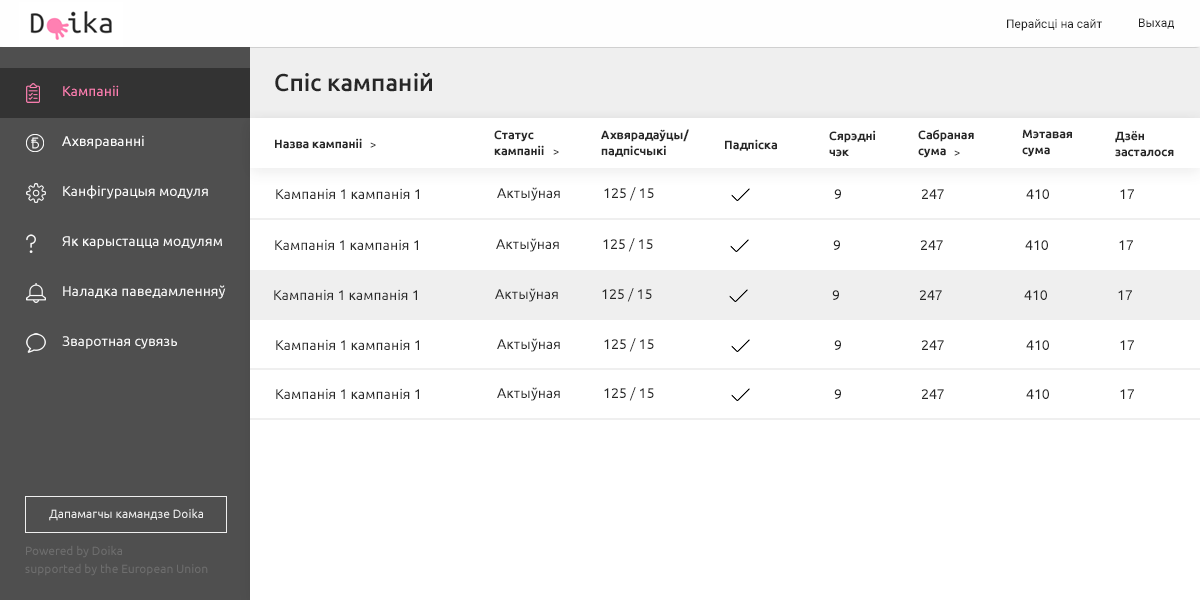
<style>
.page{position:relative;width:1200px;height:600px;background:#ffffff}
.page>*{position:absolute;margin:0}
.t1{font:12px "Roboto-Regular";color:#212121}
.t2{font:24px "Ubuntu-Medium";color:#272727}
.t3{font:14px/25px "Ubuntu-Regular";color:#fbfbfb}
.t4{font:14px/25px "Ubuntu-Regular";color:#ff80b2}
.t5{font:14px/25px "Ubuntu-Regular";color:#ffffff}
.t6{font:12px/16px "Ubuntu-Bold";color:#272727}
.t7{font:12px/16px "Roboto-Bold";color:#272727}
.t8{font:12px "Ubuntu-Bold";color:#272727}
.t9{font:12px "Roboto-Regular"}
.t10{font:14px "Ubuntu-Regular";color:#272727}
.t11{font:12px "Ubuntu-Regular";color:#f0f0f0}
.t12{font:12px/18px "Ubuntu-Regular";color:#6e6e6e}
</style>
<div class="page">
<p class="t1" style="left:1007px;top:19px;width:95px;height:12px">Перайсцi на сайт</p>
<p class="t1" style="left:1139px;top:18px;width:35px;height:11px">Выхад</p>
<p class="t2" style="left:275px;top:72px;width:157px;height:20px">Спiс кампанiй</p>
<p class="t3" style="left:62px;top:85px;width:164px;height:264px"><span class="t4">Кампанii             <br><br></span><span class="t5">Ахвяраваннi             <br></span><br>Канфiгурацыя модуля             <br><br>Як карыстацца модулям             <br><br>Наладка паведамленняў<br><br>Зваротная сувязь</p>
<p class="t6" style="left:494px;top:130px;width:50px;height:26px">Статус <br>кампанii</p>
<p class="t6" style="left:601px;top:129px;width:88px;height:28px">Ахвярадаўцы/<br><span class="t7"></span>падпісчыкi</p>
<p class="t6" style="left:829px;top:130px;width:47px;height:27px">Сярэднi <br>чэк</p>
<p class="t6" style="left:918px;top:129px;width:56px;height:29px">Сабраная <br>сума</p>
<p class="t6" style="left:1022px;top:129px;width:50px;height:28px">Мэтавая<br>сума</p>
<p class="t6" style="left:1115px;top:131px;width:59px;height:26px">Дзён<br>засталося</p>
<p class="t8" style="left:275px;top:138px;width:87px;height:11px">Назва кампанii</p>
<p class="t9" style="left:370px;top:142px;width:6px;height:6px">&gt;</p>
<p class="t9" style="left:553px;top:149px;width:6px;height:6px">&gt;</p>
<p class="t8" style="left:725px;top:139px;width:52px;height:12px">Падпiска</p>
<p class="t9" style="left:954px;top:150px;width:6px;height:6px">&gt;</p>
<p class="t10" style="left:276px;top:188px;width:143px;height:11px">Кампанiя 1 кампанiя 1</p>
<p class="t10" style="left:497px;top:187px;width:63px;height:14px">Актыўная</p>
<p class="t10" style="left:604px;top:187px;width:50px;height:14px">125 / 15</p>
<p class="t10" style="left:834px;top:189px;width:7px;height:10px">9</p>
<p class="t10" style="left:921px;top:189px;width:23px;height:10px">247</p>
<p class="t10" style="left:1026px;top:189px;width:23px;height:10px">410</p>
<p class="t10" style="left:1120px;top:189px;width:14px;height:10px">17</p>
<p class="t10" style="left:275px;top:239px;width:143px;height:11px">Кампанiя 1 кампанiя 1</p>
<p class="t10" style="left:496px;top:238px;width:63px;height:14px">Актыўная</p>
<p class="t10" style="left:603px;top:238px;width:50px;height:14px">125 / 15</p>
<p class="t10" style="left:833px;top:240px;width:7px;height:10px">9</p>
<p class="t10" style="left:920px;top:240px;width:23px;height:10px">247</p>
<p class="t10" style="left:1025px;top:240px;width:23px;height:10px">410</p>
<p class="t10" style="left:1119px;top:240px;width:14px;height:10px">17</p>
<p class="t10" style="left:274px;top:289px;width:143px;height:11px">Кампанiя 1 кампанiя 1</p>
<p class="t10" style="left:495px;top:288px;width:63px;height:14px">Актыўная</p>
<p class="t10" style="left:602px;top:288px;width:50px;height:14px">125 / 15</p>
<p class="t10" style="left:832px;top:290px;width:7px;height:10px">9</p>
<p class="t10" style="left:919px;top:290px;width:23px;height:10px">247</p>
<p class="t10" style="left:1024px;top:290px;width:23px;height:10px">410</p>
<p class="t10" style="left:1118px;top:290px;width:14px;height:10px">17</p>
<p class="t10" style="left:276px;top:339px;width:143px;height:11px">Кампанiя 1 кампанiя 1</p>
<p class="t10" style="left:497px;top:338px;width:63px;height:14px">Актыўная</p>
<p class="t10" style="left:604px;top:338px;width:50px;height:14px">125 / 15</p>
<p class="t10" style="left:834px;top:340px;width:7px;height:10px">9</p>
<p class="t10" style="left:921px;top:340px;width:23px;height:10px">247</p>
<p class="t10" style="left:1026px;top:340px;width:23px;height:10px">410</p>
<p class="t10" style="left:1120px;top:340px;width:14px;height:10px">17</p>
<p class="t10" style="left:276px;top:388px;width:143px;height:11px">Кампанiя 1 кампанiя 1</p>
<p class="t10" style="left:497px;top:387px;width:63px;height:14px">Актыўная</p>
<p class="t10" style="left:604px;top:387px;width:50px;height:14px">125 / 15</p>
<p class="t10" style="left:834px;top:389px;width:7px;height:10px">9</p>
<p class="t10" style="left:921px;top:389px;width:23px;height:10px">247</p>
<p class="t10" style="left:1026px;top:389px;width:23px;height:10px">410</p>
<p class="t10" style="left:1120px;top:389px;width:14px;height:10px">17</p>
<p class="t11" style="left:49px;top:508px;width:154px;height:13px">Дапамагчы камандзе Doika</p>
<p class="t12" style="left:25px;top:545px;width:183px;height:31px">Powered by Doika<br>supported by the European Union</p>
</div>
